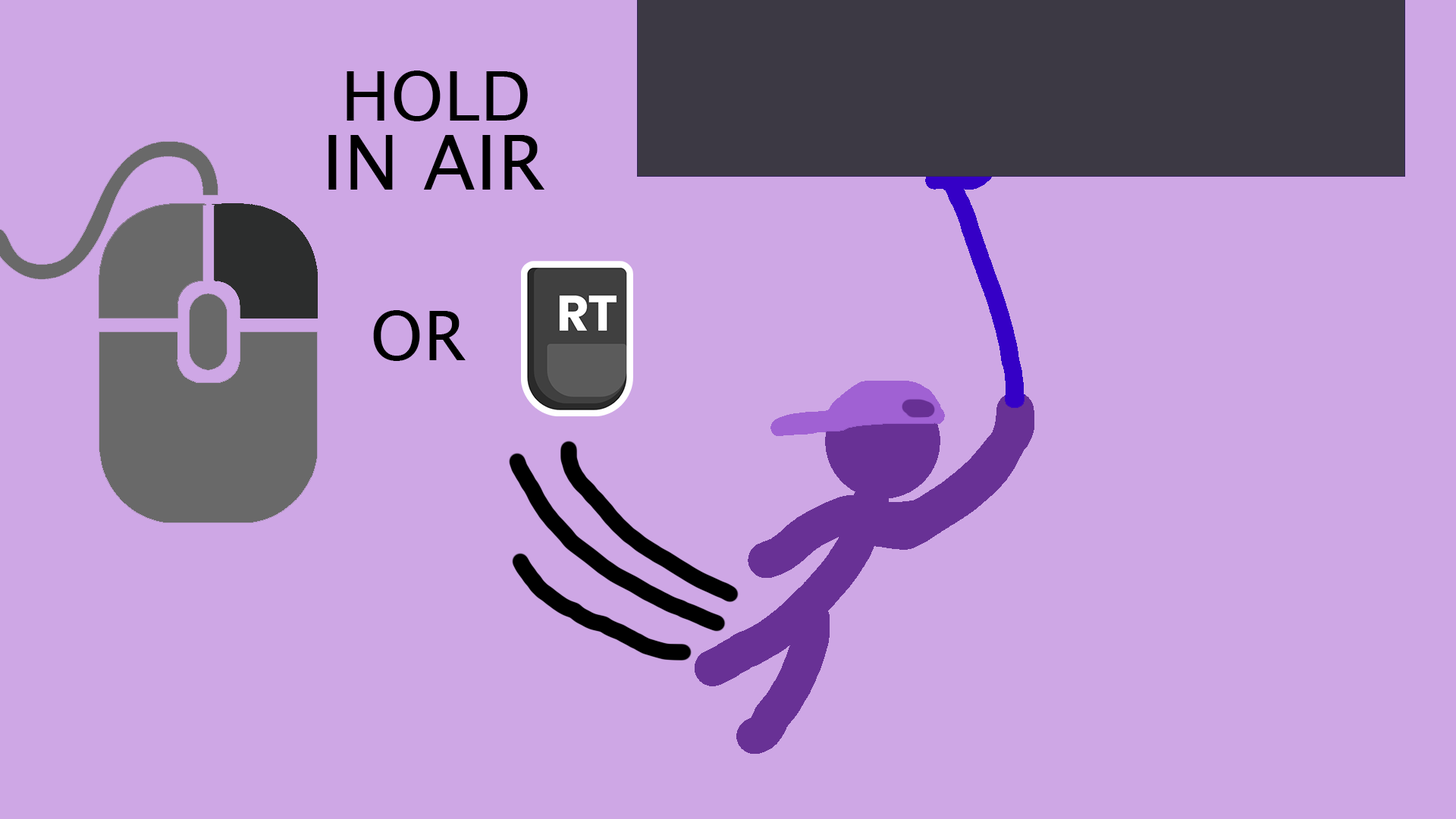
<style>
.page{position:relative;width:1456px;height:819px;background:#cea7e5}
.page>*{position:absolute;margin:0}
.t1{font:68.2px "LucidaSansUnicode";color:#000000}
.t2{font:75.8px "LucidaSansUnicode";color:#000000}
</style>
<div class="page">
<p class="t1" style="left:347px;top:71px;width:181px;height:50px">HOLD</p>
<p class="t2" style="left:328px;top:135px;width:216px;height:55px">IN AIR</p>
<p class="t1" style="left:373px;top:310px;width:93px;height:51px">OR</p>
</div>
